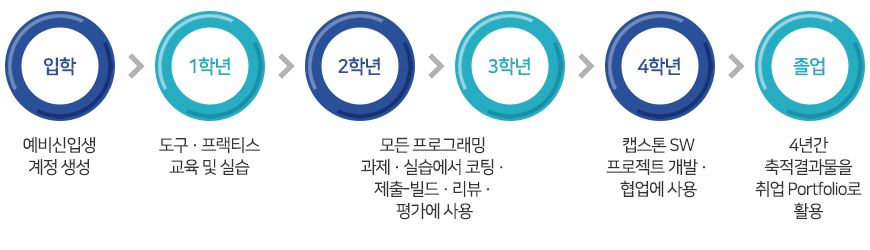
<style>
.page{position:relative;width:870px;height:250px;background:#ffffff}
.page>*{position:absolute;margin:0}
.t1{font:19px "NanumSquareB";letter-spacing:-0.05em;color:#295098}
.t2{font:19px "NanumSquareB";letter-spacing:-0.05em;color:#27adc1}
.t3{font:17px/22px "NanumSquareR";letter-spacing:-0.05em;color:#333333}
</style>
<div class="page">
<p class="t1" style="left:44px;top:57px;width:32px;height:19px">입학</p>
<p class="t2" style="left:189px;top:57px;width:41px;height:19px">1학년</p>
<p class="t1" style="left:338px;top:57px;width:42px;height:19px">2학년</p>
<p class="t2" style="left:488px;top:57px;width:42px;height:19px">3학년</p>
<p class="t1" style="left:637px;top:57px;width:43px;height:19px">4학년</p>
<p class="t2" style="left:793px;top:57px;width:32px;height:19px">졸업</p>
<p class="t3" style="left:23px;top:137px;width:72px;height:39px;text-align:center">예비신입생<br>계정 생성</p>
<p class="t3" style="left:159px;top:137px;width:101px;height:38px;text-align:center">도구 · 프랙티스<br>교육 및 실습</p>
<p class="t3" style="left:361px;top:137px;width:142px;height:83px;text-align:center">모든 프로그래밍 <br>과제 · 실습에서 코팅 · <br>제출-빌드 · 리뷰 · <br>평가에 사용</p>
<p class="t3" style="left:606px;top:137px;width:99px;height:61px;text-align:center">캡스톤 SW<br>프로젝트 개발 · <br>협업에 사용</p>
<p class="t3" style="left:755px;top:137px;width:107px;height:83px;text-align:center">4년간<br>축적결과물을<br>취업 Portfolio로<br>활용</p>
</div>
